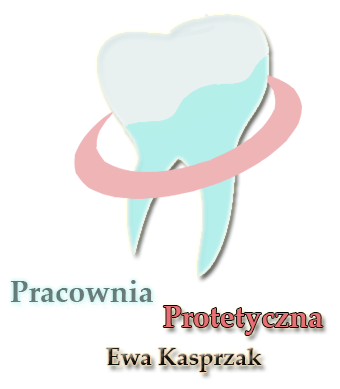
<style>
.page{position:relative;width:340px;height:389px;background:#ffffff}
.page>*{position:absolute;margin:0}
.t1{font:30px "PalatinoLinotype-Bold";color:#687a79}
.t2{font:30px "PalatinoLinotype-Bold";color:#e86f73}
.t3{font:24px "PalatinoLinotype-Bold"}
</style>
<div class="page">
<p class="t1" style="left:10px;top:280px;width:143px;height:22px">Pracownia</p>
<p class="t2" style="left:163px;top:306px;width:160px;height:29px">Protetyczna</p>
<p class="t3" style="left:106px;top:348px;width:156px;height:24px">Ewa Kasprzak</p>
</div>
